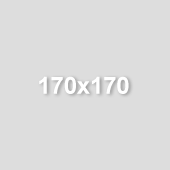
<style>
.page{position:relative;width:170px;height:170px;background:#dddddd}
.page>*{position:absolute;margin:0}
.t1{font:23.7px "Arial-BoldMT";color:#ffffff}
</style>
<div class="page">
<p class="t1" style="left:39px;top:76px;width:90px;height:18px">170x170</p>
</div>
